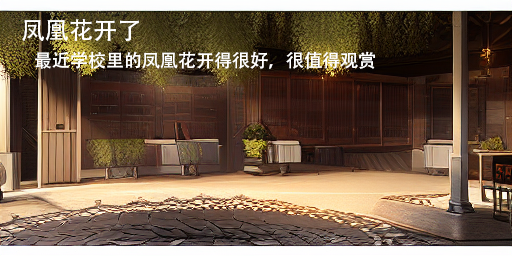
<style>
.page{position:relative;width:512px;height:256px}
.page>*{position:absolute;margin:0}
.t1{font:24px "AdobeHeitiStd-Regular";color:#ffffff}
.t2{font:18px "AdobeHeitiStd-Regular";color:#ffffff}
</style>
<div class="page">
<p class="t1" style="left:22px;top:19px;width:117px;height:23px">凤凰花开了</p>
<p class="t2" style="left:35px;top:51px;width:340px;height:18px">最近学校里的凤凰花开得很好，很值得观赏</p>
</div>
